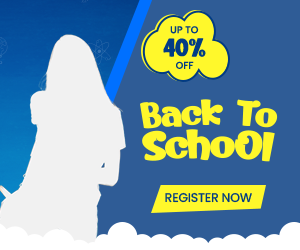
<style>
.page{position:relative;width:300px;height:250px;background:#2f5c96}
.page>*{position:absolute;margin:0}
.t1{font:9.9px "Poppins-Medium";color:#023c85}
.t2{font:24.8px "Kerokero";color:#023c85}
.t3{font:34.8px "Kerokero";letter-spacing:-0.02em;color:#fff82b;scale:1.15 1}
.t4{font:39.4px "Kerokero";letter-spacing:-0.02em;color:#fff82b;scale:1.15 1}
.t5{font:12.7px "Poppins-Medium";letter-spacing:-0.02em;color:#023b83}
</style>
<div class="page">
<p class="t1" style="left:170px;top:26px;width:29px;height:8px">UP TO</p>
<p class="t2" style="left:163px;top:38px;width:43px;height:19px">40%</p>
<p class="t1" style="left:176px;top:61px;width:18px;height:8px">OFF</p>
<p class="t3" style="left:140px;top:99px;width:138px;height:30px">Back To</p>
<p class="t4" style="left:142px;top:129px;width:133px;height:33px">SchoOl</p>
<p class="t5" style="left:165px;top:192px;width:87px;height:11px">REGISTER NOW</p>
</div>
